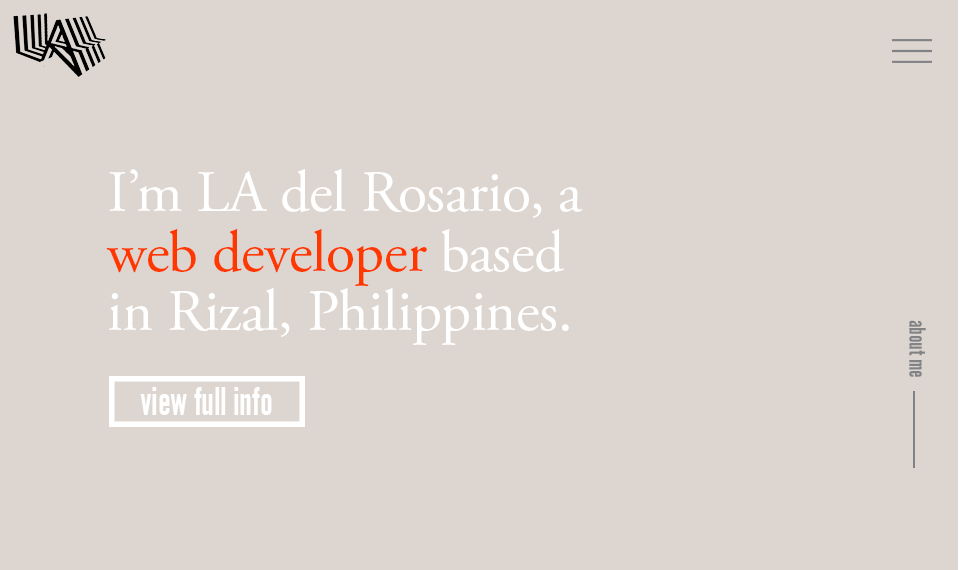
<style>
.page{position:relative;width:960px;height:570px;background:#ddd6d0}
.page>*{position:absolute;margin:0}
.t1{font:59.3px/59.3px "AGaramondPro-Regular";letter-spacing:-0.01em;color:#ffffff}
.t2{font:59.3px/59.3px "AGaramondPro-Regular";letter-spacing:-0.01em;color:#ff3800}
.t3{font:24.9px "AlternateGotNo1D";letter-spacing:-0.01em;color:#818286}
.t4{font:41.7px "AlternateGotNo1D";letter-spacing:-0.01em;color:#ffffff}
</style>
<div class="page">
<p class="t1" style="left:106px;top:169px;width:477px;height:176px">I’m LA del Rosario, a <span class="t2">web developer</span> based in Rizal, Philippines.</p>
<p class="t3" style="left:909px;top:320px;width:17px;height:57px;rotate:90deg">about me</p>
<p class="t4" style="left:140px;top:387px;width:132px;height:28px">view full info</p>
</div>
